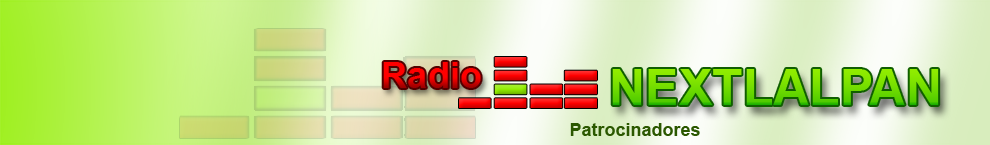
<style>
.page{position:relative;width:990px;height:145px}
.page>*{position:absolute;margin:0}
.t1{font:36px "Arial-BoldMT";color:#ff0000}
.t2{font:50px "Arial-BoldMT"}
.t3{font:18px "Arial-BoldMT";color:#2b5800}
</style>
<div class="page">
<p class="t1" style="left:383px;top:62px;width:98px;height:26px">Radio</p>
<p class="t2" style="left:612px;top:69px;width:327px;height:36px">NEXTLALPAN</p>
<p class="t3" style="left:570px;top:123px;width:130px;height:13px">Patrocinadores</p>
</div>
